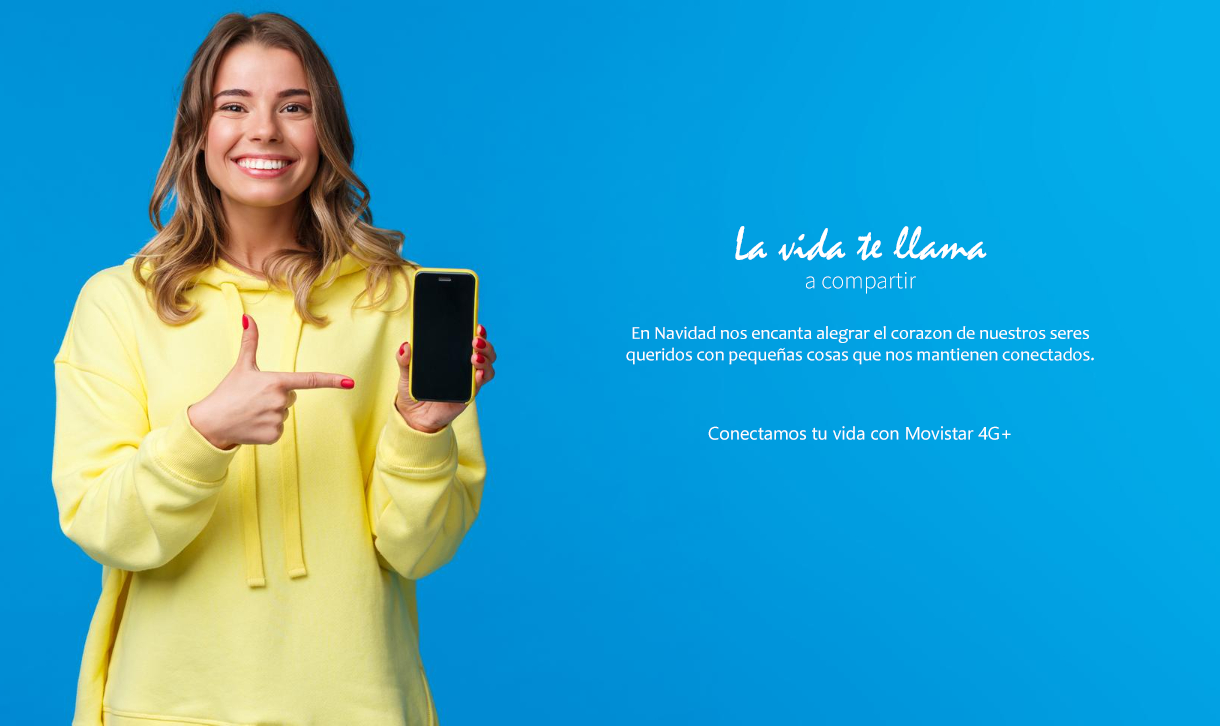
<style>
.page{position:relative;width:1220px;height:726px}
.page>*{position:absolute;margin:0}
.t1{font:18px "Candara";color:#ffffff}
.t2{font:48px "Mistral";color:#ffffff}
.t3{font:24px "SourceSansRoman_259.000wght";color:#ffffff}
.t4{font:18px "SegoeUIHistoric";color:#ffffff}
</style>
<div class="page">
<p class="t1" style="left:626px;top:226px;width:468px;height:214px;text-align:center"><span class="t2">La vida te llama <br></span><span class="t3">a compartir<br><br></span>En Navidad nos encanta alegrar el corazon de nuestros seres queridos con pequeñas cosas que nos mantienen conectados.<br><br><br><span class="t4">Conectamos tu vida con Movistar 4G+</span></p>
</div>
